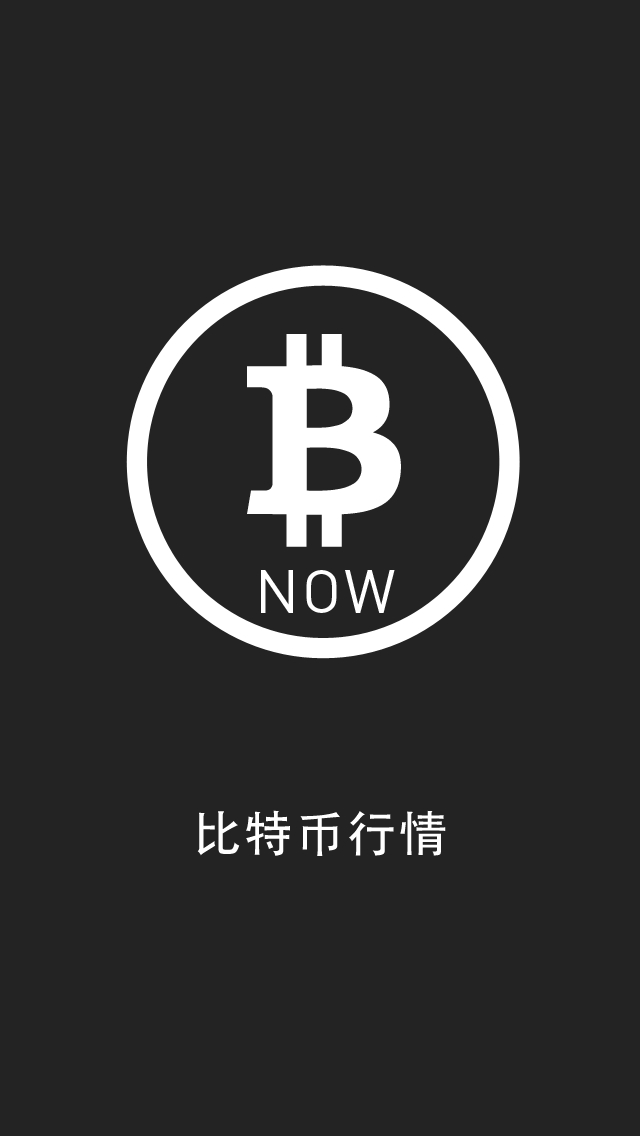
<style>
.page{position:relative;width:640px;height:1136px;background:#232323}
.page>*{position:absolute;margin:0}
.t1{font:60.3px "DINPro-Regular";letter-spacing:0.05em;color:#ffffff}
.t2{font:49.2px "AdobeHeitiStd-Regular";letter-spacing:0.05em;color:#ffffff}
</style>
<div class="page">
<p class="t1" style="left:261px;top:570px;width:134px;height:43px">NOW</p>
<p class="t2" style="left:197px;top:810px;width:249px;height:46px">比特币行情</p>
</div>
